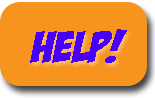
<style>
.page{position:relative;width:155px;height:98px;background:#f7941d}
.page>*{position:absolute;margin:0}
.t1{font:44.2px "BadaBoomBB";color:#4700fa;scale:1.15 1}
</style>
<div class="page">
<p class="t1" style="left:30px;top:29px;width:97px;height:34px">HELP!</p>
</div>
